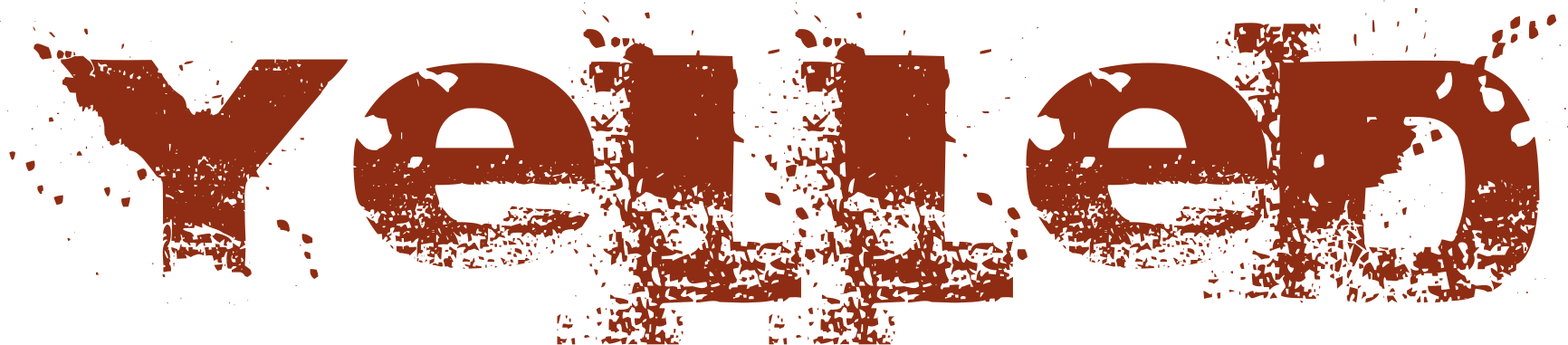
<style>
.page{position:relative;width:1568px;height:345px;background:#ffffff}
.page>*{position:absolute;margin:0}
.t1{font:271.6px "Abite";letter-spacing:0.025em;color:#8e2d13}
</style>
<div class="page">
<p class="t1" style="left:0px;top:0px;width:1568px;height:345px">YELLED</p>
</div>
